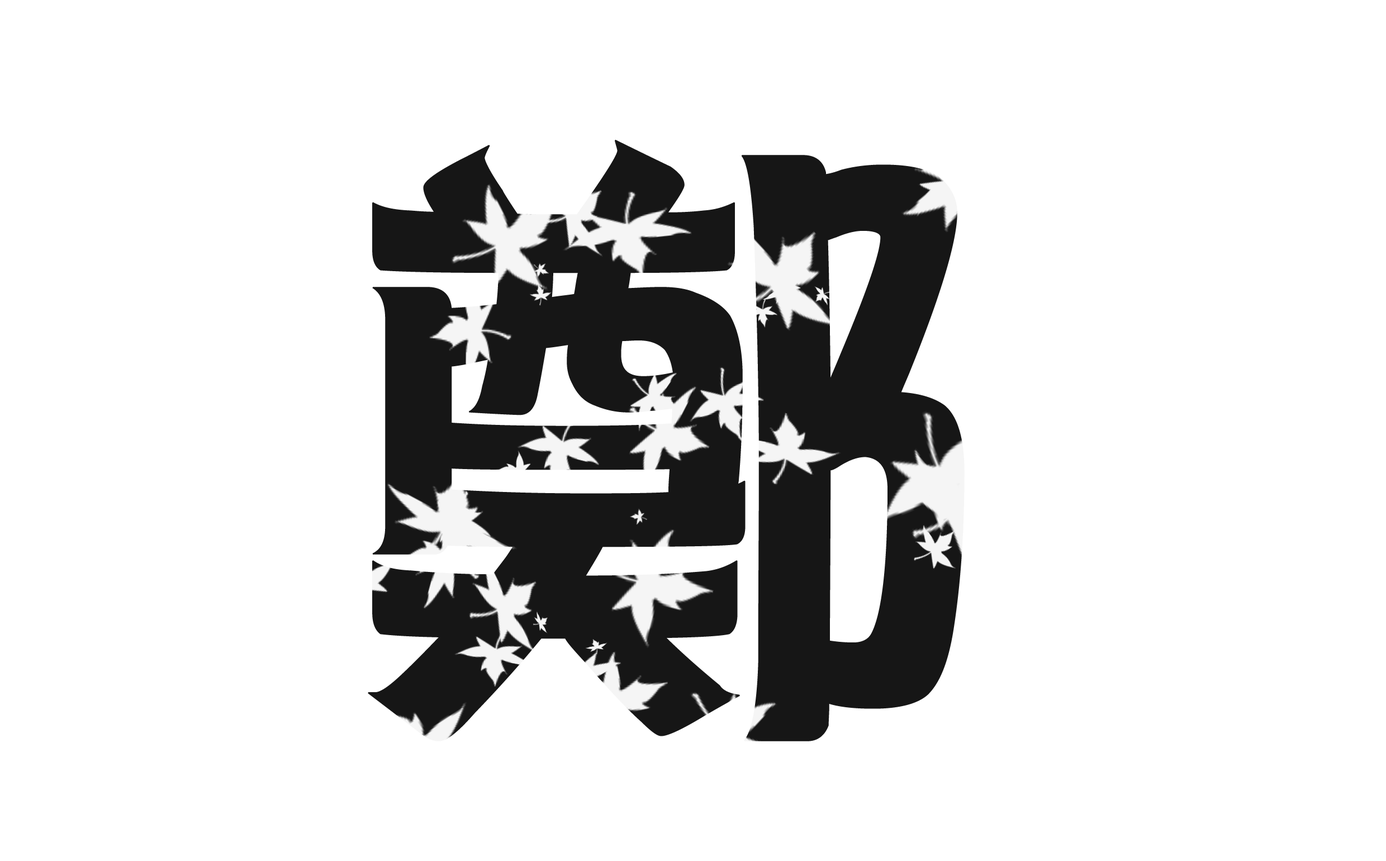
<style>
.page{position:relative;width:1386px;height:861px;background:#ffffff}
.page>*{position:absolute;margin:0}
.t1{font:636.8px "DFPOP2Std-W9";color:#161616;font-weight:bold}
</style>
<div class="page">
<p class="t1" style="left:368px;top:140px;width:596px;height:601px">鄭</p>
</div>
